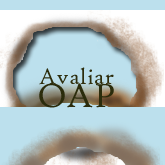
<style>
.page{position:relative;width:165px;height:165px;background:#bce0ed}
.page>*{position:absolute;margin:0}
.t1{font:24px "HighTowerText-Reg";color:#2b2c0c}
.t2{font:36px "HighTowerText-Reg";color:#2b2c0c}
</style>
<div class="page">
<p class="t1" style="left:39px;top:67px;width:75px;height:18px">Avaliar</p>
<p class="t2" style="left:39px;top:83px;width:75px;height:25px">OAP</p>
</div>
